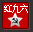
<style>
.page{position:relative;width:33px;height:32px;background:#c50000}
.page>*{position:absolute;margin:0}
.t1{font:10.4px "SimSun";letter-spacing:-0.25em;color:#ffffff}
</style>
<div class="page">
<p class="t1" style="left:4px;top:4px;width:24px;height:9px">红九六</p>
</div>
